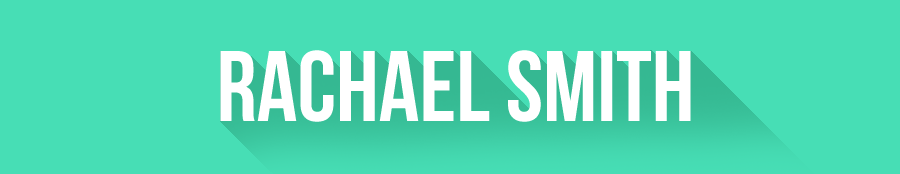
<style>
.page{position:relative;width:900px;height:174px;background:#47deb5}
.page>*{position:absolute;margin:0}
.t1{font:100px "BebasNeue";color:#ffffff}
</style>
<div class="page">
<p class="t1" style="left:220px;top:50px;width:471px;height:72px">rachael smith</p>
</div>
